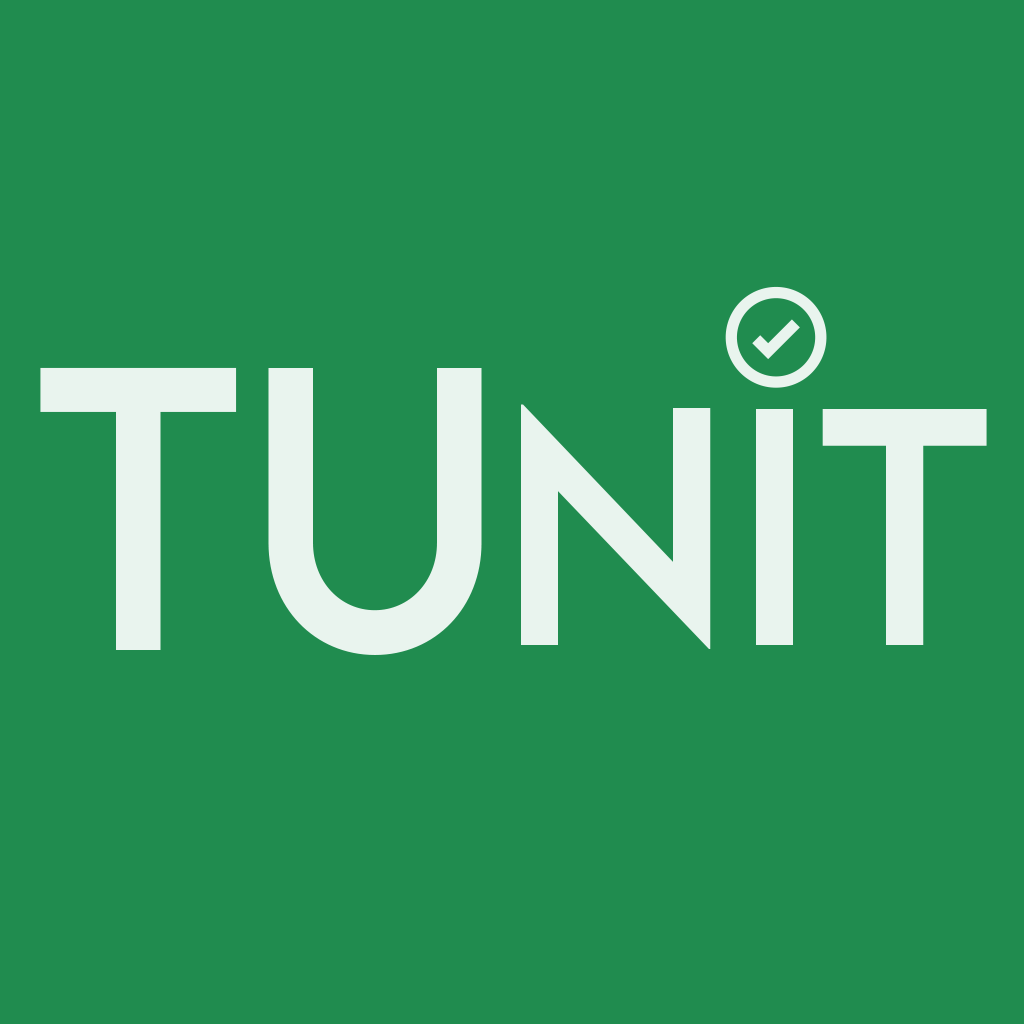
<style>
.page{position:relative;width:1024px;height:1024px;background:#208c4f}
.page>*{position:absolute;margin:0}
.t1{font:358.3px "LEMONMILK-Regular";color:#e9f4ee}
.t2{font:300px "LEMONMILK-Regular";color:#e9f4ee}
</style>
<div class="page">
<p class="t1" style="left:40px;top:367px;width:442px;height:288px">TU</p>
<p class="t2" style="left:521px;top:404px;width:466px;height:245px">nit</p>
</div>
